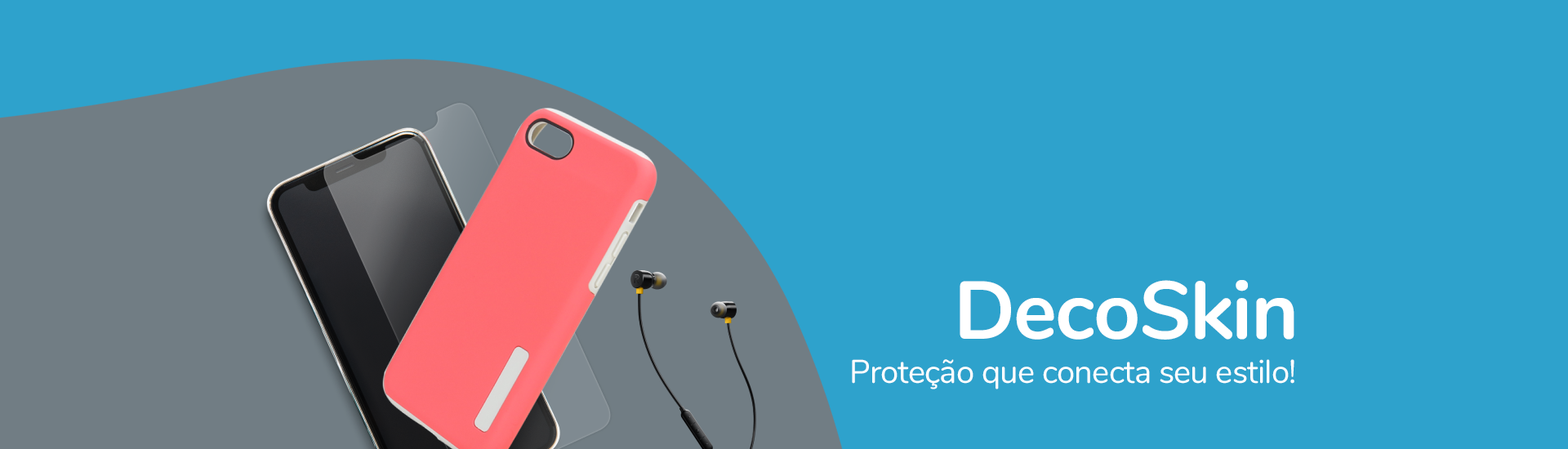
<style>
.page{position:relative;width:1568px;height:449px;background:#2ea2cc}
.page>*{position:absolute;margin:0}
.t1{font:81.7px "Nunito-Bold";letter-spacing:-0.02em;color:#ffffff}
.t2{font:32.7px "Nunito-Regular";letter-spacing:-0.02em;color:#ffffff}
</style>
<div class="page">
<p class="t1" style="left:960px;top:280px;width:334px;height:60px">DecoSkin</p>
<p class="t2" style="left:852px;top:359px;width:442px;height:31px">Proteção que conecta seu estilo!</p>
</div>
